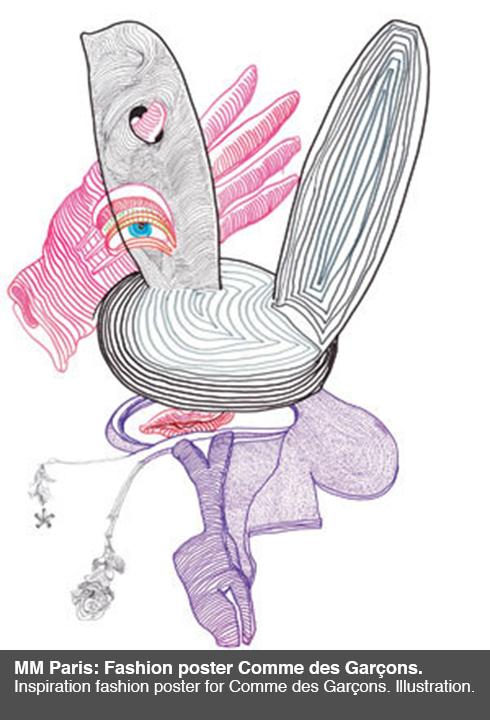
<style>
.page{position:relative;width:490px;height:720px;background:#ffffff}
.page>*{position:absolute;margin:0}
.t1{font:16.7px/18px "Helvetica";color:#ffffff}
.t2{font:18px/18px "Helvetica-Bold";color:#ffffff}
</style>
<div class="page">
<p class="t1" style="left:15px;top:661px;width:459px;height:34px"><span class="t2">MM Paris: Fashion poster Comme des Garçons.<br></span>Inspiration fashion poster for Comme des Garçons. lllustration.</p>
</div>
